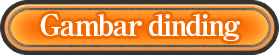
<style>
.page{position:relative;width:279px;height:55px}
.page>*{position:absolute;margin:0}
.t1{font:30px "RyuminPro-ExBold";letter-spacing:-0.08em;color:#fffff7}
</style>
<div class="page">
<p class="t1" style="left:40px;top:13px;width:200px;height:28px">Gambar dinding</p>
</div>
